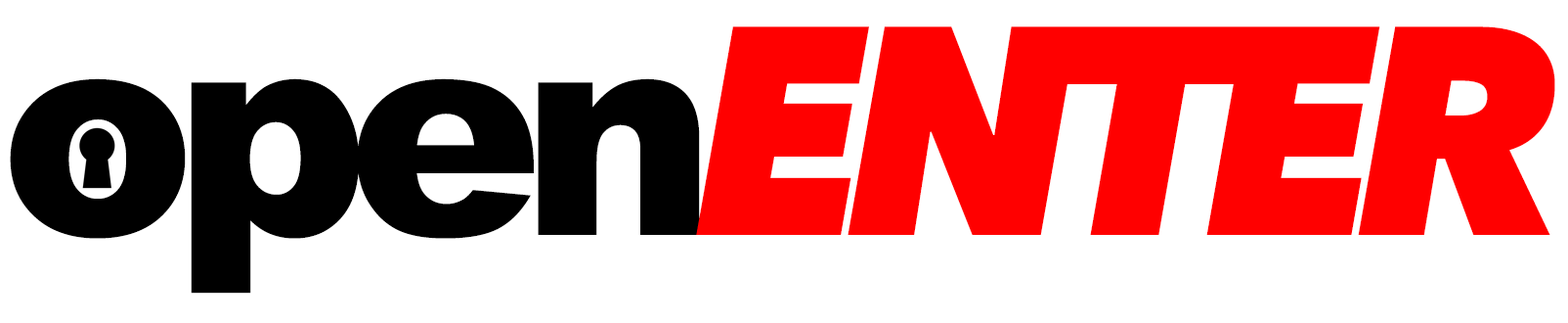
<style>
.page{position:relative;width:1568px;height:323px;background:#ffffff}
.page>*{position:absolute;margin:0}
.t1{font:293.3px "AvenirNext-HeavyItalic";letter-spacing:-0.075em;color:#ff0000}
.t2{font:293.3px "Arial-Black";letter-spacing:-0.075em;color:#000000}
</style>
<div class="page">
<p class="t1" style="left:10px;top:26px;width:1545px;height:267px"><span class="t2">open</span>ENTER</p>
</div>
